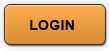
<style>
.page{position:relative;width:109px;height:51px}
.page>*{position:absolute;margin:0}
.t1{font:14px "Arial-BoldMT";letter-spacing:0.025em;color:#010101}
</style>
<div class="page">
<p class="t1" style="left:30px;top:20px;width:44px;height:10px">LOGIN</p>
</div>
